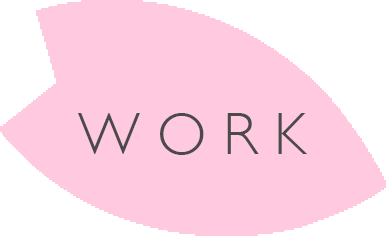
<style>
.page{position:relative;width:386px;height:236px;background:#ffc9df}
.page>*{position:absolute;margin:0}
.t1{font:60px "GillSans-Light";color:#4a4a4a}
</style>
<div class="page">
<p class="t1" style="left:78px;top:113px;width:230px;height:42px">W O R K</p>
</div>
